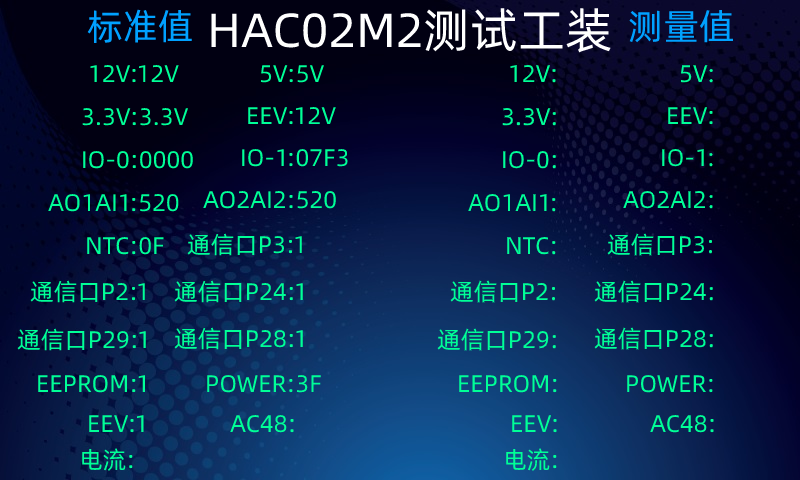
<style>
.page{position:relative;width:800px;height:480px}
.page>*{position:absolute;margin:0}
.t1{font:36px "AlibabaPuHuiTi-Regular";color:#00a1ff}
.t2{font:48px "AlibabaPuHuiTi-Regular";color:#ffffff}
.t3{font:24px "AlibabaPuHuiTi-Regular";color:#00ff97}
</style>
<div class="page">
<p class="t1" style="left:87px;top:9px;width:646px;height:35px">标准值                                               测量值</p>
<p class="t2" style="left:211px;top:8px;width:400px;height:45px">HAC02M2测试工装</p>
<p class="t3" style="left:90px;top:65px;width:89px;height:18px">12V:12V</p>
<p class="t3" style="left:261px;top:65px;width:63px;height:18px">5V:5V</p>
<p class="t3" style="left:510px;top:65px;width:46px;height:18px">12V:</p>
<p class="t3" style="left:681px;top:65px;width:32px;height:18px">5V:</p>
<p class="t3" style="left:82px;top:108px;width:107px;height:18px">3.3V:3.3V</p>
<p class="t3" style="left:248px;top:107px;width:88px;height:18px">EEV:12V</p>
<p class="t3" style="left:502px;top:108px;width:54px;height:18px">3.3V:</p>
<p class="t3" style="left:668px;top:107px;width:45px;height:18px">EEV:</p>
<p class="t3" style="left:242px;top:149px;width:106px;height:18px">IO-1:07F3</p>
<p class="t3" style="left:662px;top:149px;width:51px;height:18px">IO-1:</p>
<p class="t3" style="left:83px;top:151px;width:110px;height:18px">IO-0:0000</p>
<p class="t3" style="left:503px;top:151px;width:53px;height:18px">IO-0:</p>
<p class="t3" style="left:48px;top:194px;width:131px;height:18px">AO1AI1:520</p>
<p class="t3" style="left:203px;top:191px;width:133px;height:18px">AO2AI2:520</p>
<p class="t3" style="left:468px;top:194px;width:88px;height:18px">AO1AI1:</p>
<p class="t3" style="left:623px;top:191px;width:90px;height:18px">AO2AI2:</p>
<p class="t3" style="left:187px;top:233px;width:115px;height:23px">通信口P3:1</p>
<p class="t3" style="left:607px;top:233px;width:106px;height:23px">通信口P3:</p>
<p class="t3" style="left:87px;top:237px;width:77px;height:18px">NTC:0F</p>
<p class="t3" style="left:507px;top:237px;width:49px;height:18px">NTC:</p>
<p class="t3" style="left:30px;top:280px;width:115px;height:23px">通信口P2:1</p>
<p class="t3" style="left:174px;top:280px;width:129px;height:23px">通信口P24:1</p>
<p class="t3" style="left:450px;top:280px;width:106px;height:23px">通信口P2:</p>
<p class="t3" style="left:594px;top:280px;width:119px;height:23px">通信口P24:</p>
<p class="t3" style="left:17px;top:328px;width:129px;height:23px">通信口P29:1</p>
<p class="t3" style="left:174px;top:327px;width:129px;height:23px">通信口P28:1</p>
<p class="t3" style="left:437px;top:328px;width:119px;height:23px">通信口P29:</p>
<p class="t3" style="left:594px;top:327px;width:119px;height:23px">通信口P28:</p>
<p class="t3" style="left:38px;top:375px;width:108px;height:18px">EEPROM:1</p>
<p class="t3" style="left:207px;top:375px;width:114px;height:18px">POWER:3F</p>
<p class="t3" style="left:459px;top:375px;width:98px;height:18px">EEPROM:</p>
<p class="t3" style="left:627px;top:375px;width:86px;height:18px">POWER:</p>
<p class="t3" style="left:89px;top:415px;width:55px;height:18px">EEV:1</p>
<p class="t3" style="left:230px;top:415px;width:64px;height:18px">AC48:</p>
<p class="t3" style="left:512px;top:415px;width:45px;height:18px">EEV:</p>
<p class="t3" style="left:650px;top:415px;width:64px;height:18px">AC48:</p>
<p class="t3" style="left:82px;top:448px;width:51px;height:23px">电流:</p>
<p class="t3" style="left:506px;top:448px;width:51px;height:23px">电流:</p>
</div>
